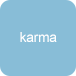
<style>
.page{position:relative;width:76px;height:76px;background:#88bdd7}
.page>*{position:absolute;margin:0}
.t1{font:14px "ArialMT";letter-spacing:-0.025em;color:#ffffff}
</style>
<div class="page">
<p class="t1" style="left:20px;top:32px;width:37px;height:10px">karma</p>
</div>
